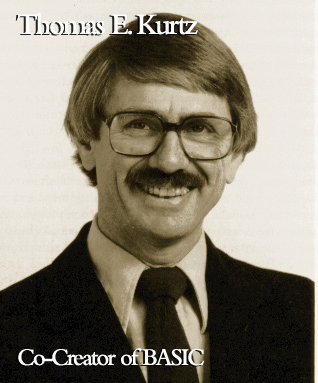
<style>
.page{position:relative;width:318px;height:383px}
.page>*{position:absolute;margin:0}
.t1{font:31.2px "BemboMT-SemiBold";letter-spacing:-0.08em;color:#ffffff;scale:0.95 1}
.t2{font:25px "BemboMT-SemiBold";letter-spacing:-0.08em;color:#ffffff;scale:0.95 1}
</style>
<div class="page">
<p class="t1" style="left:17px;top:13px;width:181px;height:22px">Thomas E. Kurtz</p>
<p class="t2" style="left:18px;top:348px;width:187px;height:18px">Co-Creator of BASIC</p>
</div>
